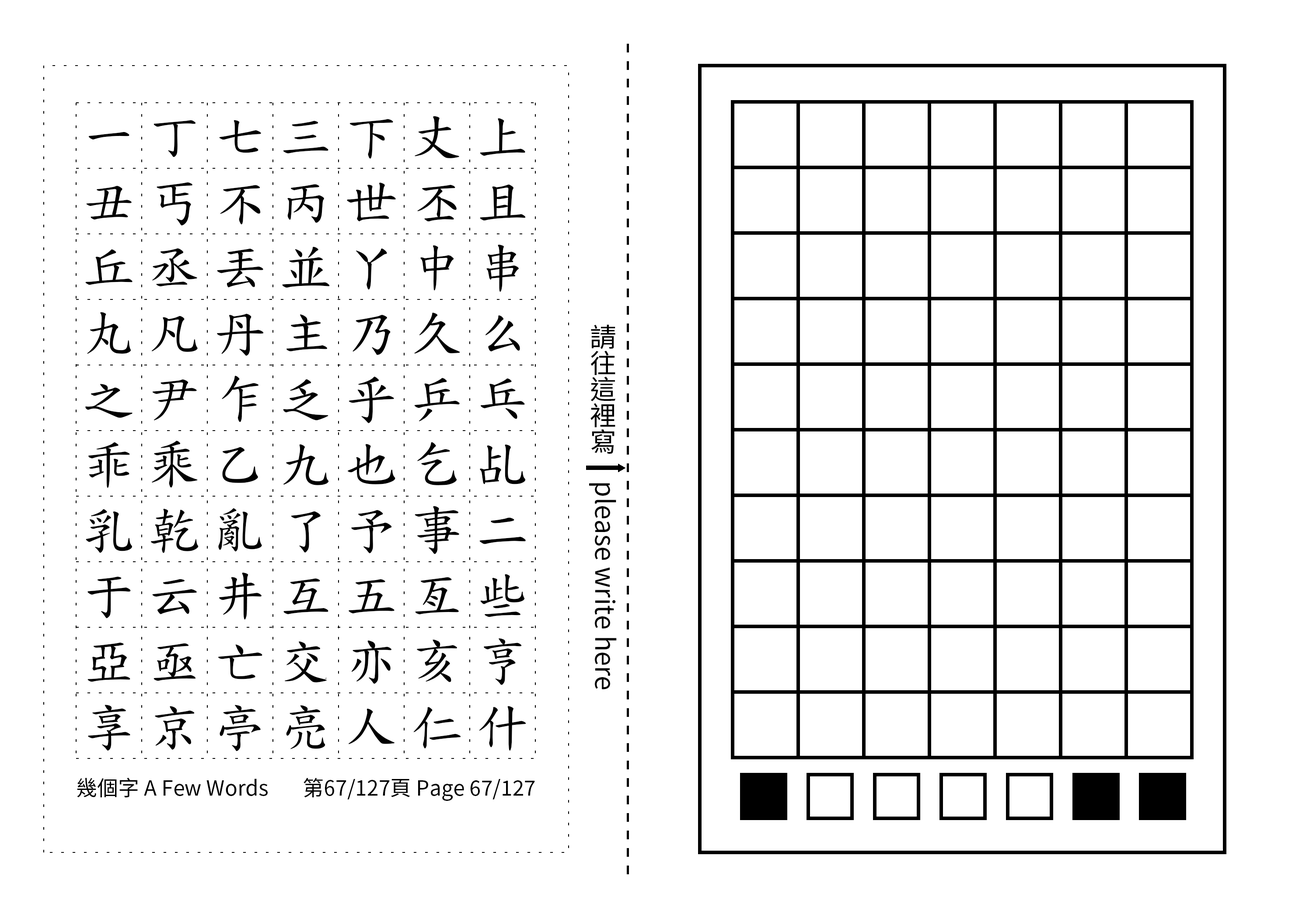
<style>
.page{position:relative;width:1299px;height:918px;background:#ffffff}
.page>*{position:absolute;margin:0}
.t1{font:52.5px/65.6px "TW-Kai-98_1";letter-spacing:0.25em;color:#000000}
.t2{font:26.2px "SourceHanSansTC-Regular";color:#000000}
.t3{font:21px "SourceHanSansTC-Regular";color:#000000}
</style>
<div class="page">
<p class="t1" style="left:85px;top:116px;width:441px;height:636px;text-align:center">一丁七三下丈上丑丐不丙世丕且丘丞丟並丫中串丸凡丹主乃久么之尹乍乏乎乒乓乖乘乙九也乞乩乳乾亂了予事二于云井互五亙些亞亟亡交亦亥亨享京亭亮人仁什</p>
<p class="t2" style="left:589px;top:324px;width:28px;height:366px;text-align:center">請往這裡寫　please write here</p>
<p class="t3" style="left:77px;top:778px;width:191px;height:20px">幾個字 A Few Words</p>
<p class="t3" style="left:303px;top:778px;width:232px;height:23px">第67/127頁 Page 67/127</p>
</div>
